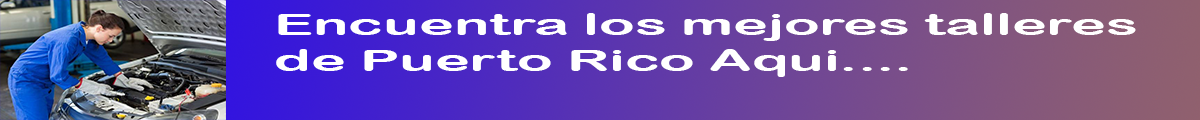
<style>
.page{position:relative;width:1200px;height:120px}
.page>*{position:absolute;margin:0}
.t1{font:30px "ArialRoundedMTBold";color:#ffffff;scale:1.95 1}
</style>
<div class="page">
<p class="t1" style="left:276px;top:13px;width:860px;height:64px">Encuentra los mejores talleres <br>de Puerto Rico Aqui....</p>
</div>
